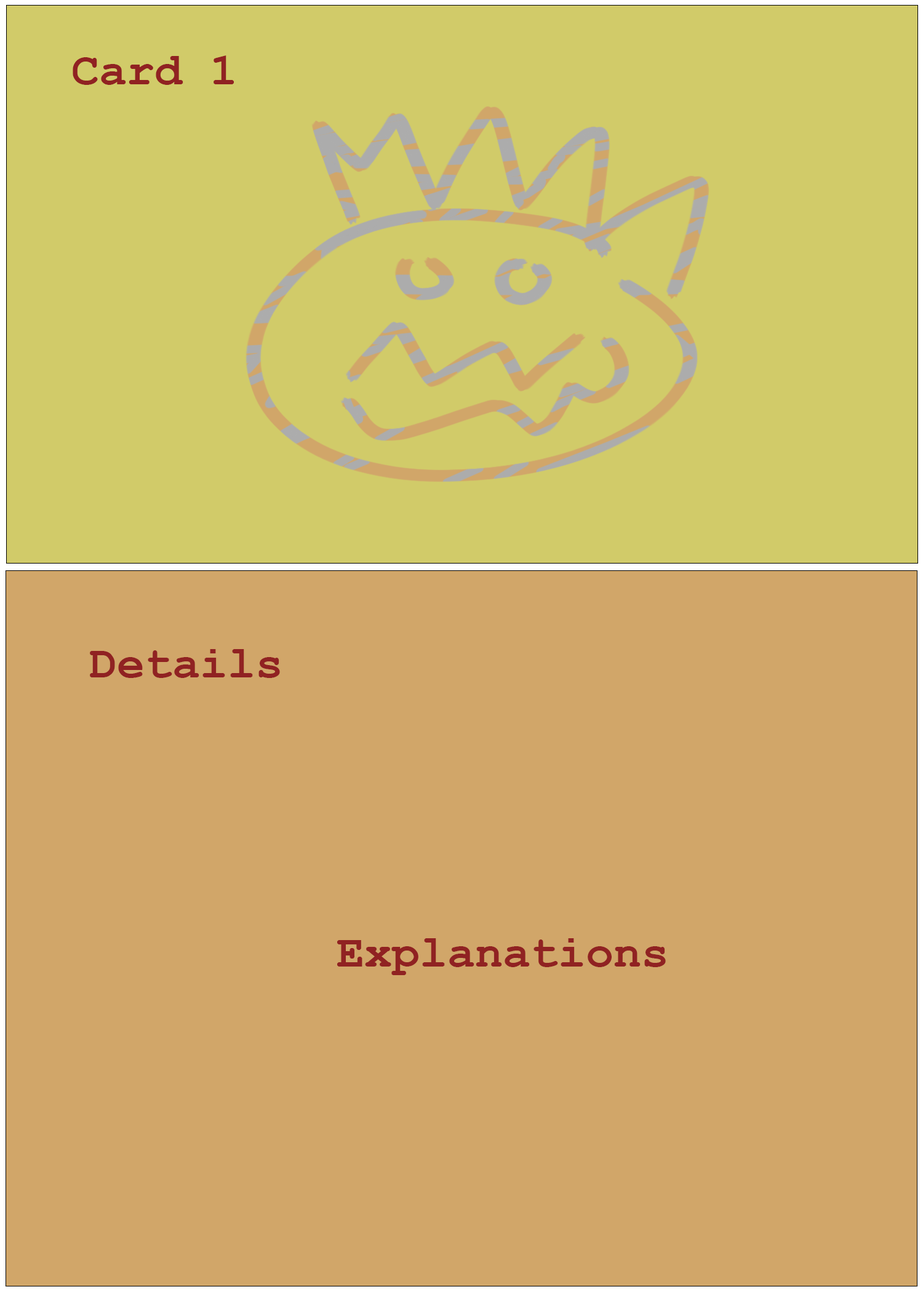
<style>
.page{position:relative;width:923px;height:1292px;background:#d1a669}
.page>*{position:absolute;margin:0}
.t1{font:46.1px "CourierNewPS-BoldMT";color:#902222}
</style>
<div class="page">
<p class="t1" style="left:73px;top:55px;width:161px;height:30px">Card 1</p>
<p class="t1" style="left:90px;top:649px;width:190px;height:29px">Details</p>
<p class="t1" style="left:337px;top:938px;width:329px;height:37px">Explanations</p>
</div>
